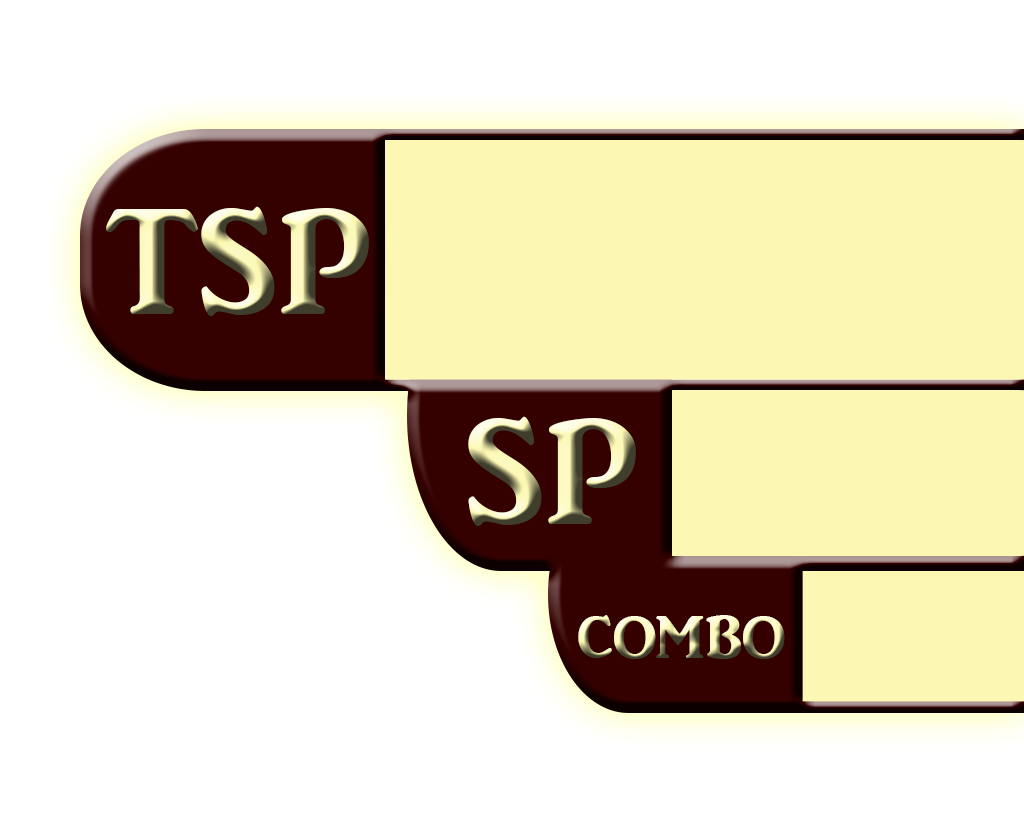
<style>
.page{position:relative;width:1024px;height:818px;background:#ffffff}
.page>*{position:absolute;margin:0}
.t1{font:195.1px "ARJULIAN"}
.t2{font:78.1px "ARJULIAN"}
</style>
<div class="page">
<p class="t1" style="left:106px;top:206px;width:263px;height:110px">tsp</p>
<p class="t1" style="left:468px;top:416px;width:168px;height:110px">sp</p>
<p class="t2" style="left:578px;top:615px;width:207px;height:44px">combo</p>
</div>
